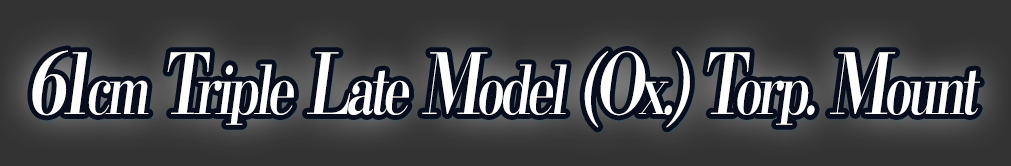
<style>
.page{position:relative;width:1011px;height:166px;background:#333333}
.page>*{position:absolute;margin:0}
.t1{font:67.2px "KochoStd-Heavy";letter-spacing:-0.08em;color:#ffffff;font-style:italic;scale:0.75 1}
.t2{font:84px "KochoStd-Heavy";letter-spacing:-0.08em;color:#ffffff;font-style:italic;scale:0.75 1}
</style>
<div class="page">
<p class="t1" style="left:32px;top:50px;width:948px;height:78px"><span class="t2">61</span>cm<span class="t2"> T</span>riple<span class="t2"> L</span>ate<span class="t2"> M</span>odel<span class="t2"> (O</span>x.<span class="t2">) T</span>orp.<span class="t2"> M</span>ount</p>
</div>
